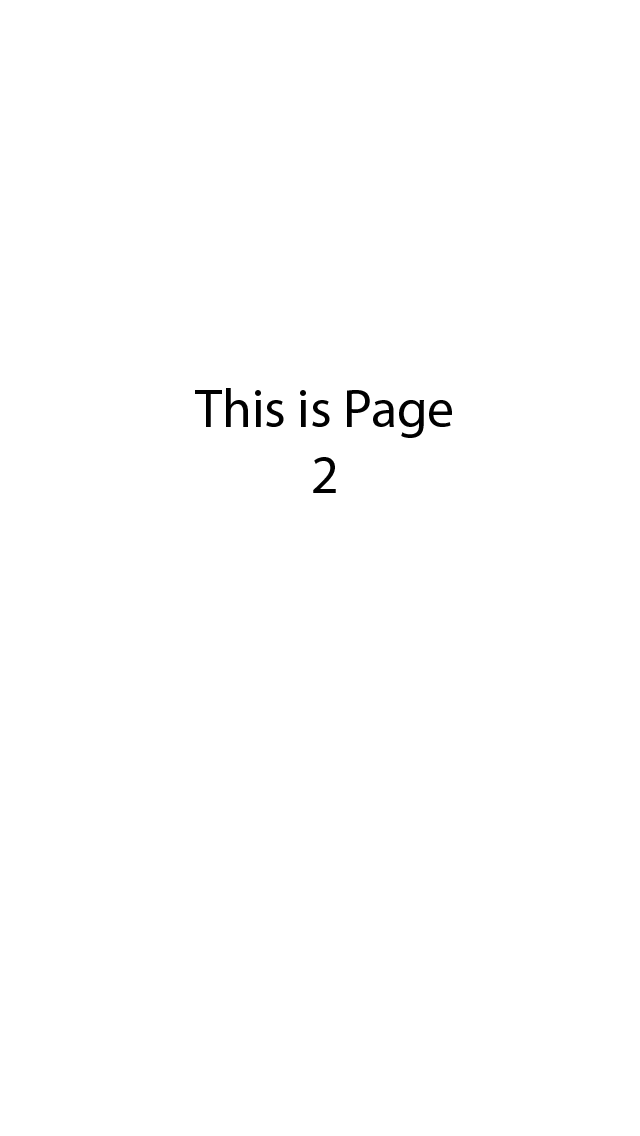
<style>
.page{position:relative;width:640px;height:1136px;background:#ffffff}
.page>*{position:absolute;margin:0}
.t1{font:54.3px "MyriadPro-Regular";color:#000000}
</style>
<div class="page">
<p class="t1" style="left:195px;top:388px;width:257px;height:105px;text-align:center">This is Page <br>2</p>
</div>
